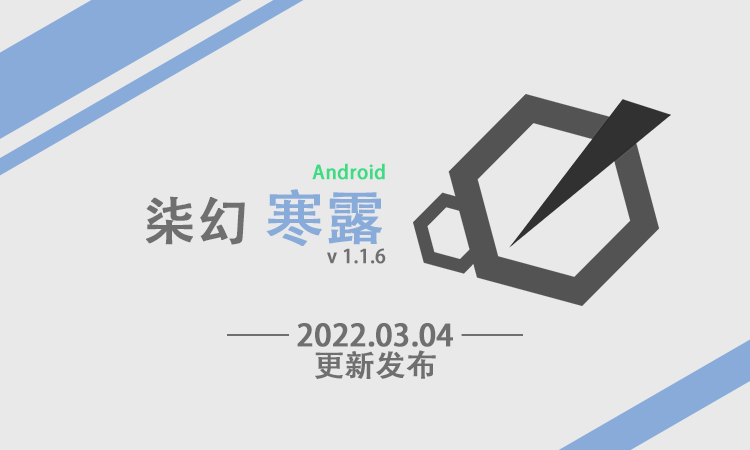
<style>
.page{position:relative;width:750px;height:450px;background:#e9e9e9}
.page>*{position:absolute;margin:0}
.t1{font:19px/24px "AdobeHeitiStd-Regular";color:#3ddc84;font-weight:bold}
.t2{font:52px/60px "AdobeHeitiStd-Regular";color:#6f6f6f;font-weight:bold}
.t3{font:60px/60px "AdobeHeitiStd-Regular";color:#88abda;font-weight:bold}
.t4{font:19px/24px "AdobeHeitiStd-Regular";color:#6f6f6f;font-weight:bold}
.t5{font:30px/30px "AdobeHeitiStd-Regular";color:#6f6f6f;font-weight:bold}
</style>
<div class="page">
<p class="t1" style="left:146px;top:163px;width:240px;height:101px;text-align:right">Android <br><span class="t2">柒幻 </span><span class="t3">寒露<br></span><span class="t4">v 1.1.6</span></p>
<p class="t5" style="left:227px;top:323px;width:296px;height:56px;text-align:center">—— 2022.03.04 ——<br>更新发布</p>
</div>
